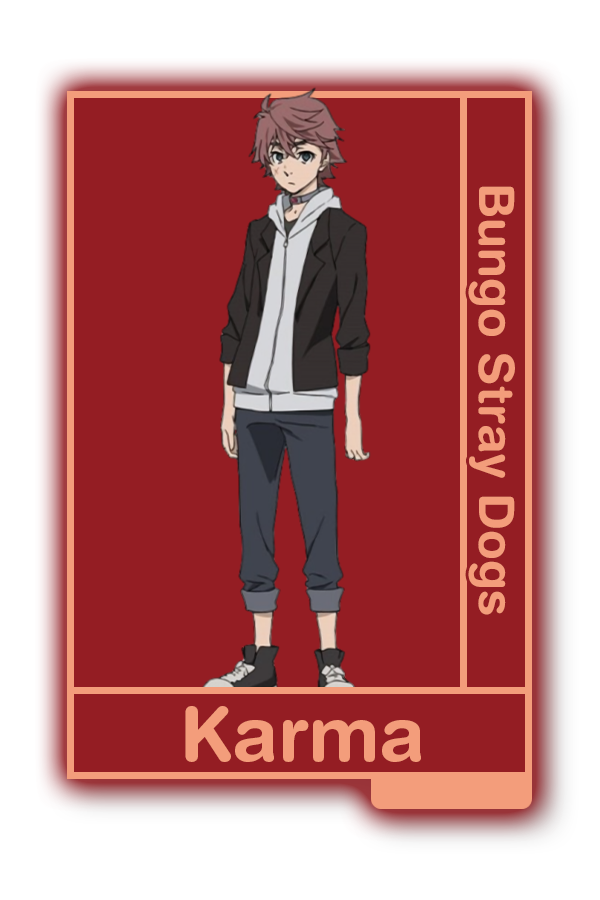
<style>
.page{position:relative;width:600px;height:900px;background:#941d23}
.page>*{position:absolute;margin:0}
.t1{font:48.8px "HelveticaRounded-Bold";color:#f39d7b}
.t2{font:75.7px "HelveticaRounded-Bold";color:#f39d7b}
</style>
<div class="page">
<p class="t1" style="left:468px;top:186px;width:47px;height:429px;rotate:90deg">Bungo Stray Dogs</p>
<p class="t2" style="left:185px;top:706px;width:236px;height:56px">Karma</p>
</div>
